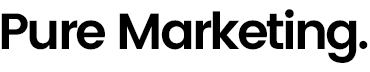
<style>
.page{position:relative;width:370px;height:72px;background:#ffffff}
.page>*{position:absolute;margin:0}
.t1{font:51px "Poppins-SemiBold";letter-spacing:-0.06em;color:#000000}
</style>
<div class="page">
<p class="t1" style="left:1px;top:9px;width:367px;height:54px">Pure Marketing.</p>
</div>
